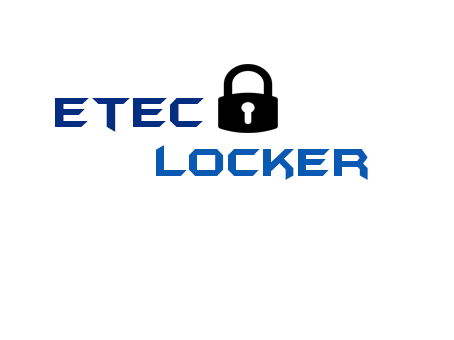
<style>
.page{position:relative;width:454px;height:340px;background:#ffffff}
.page>*{position:absolute;margin:0}
.t1{font:48px "BatmanForeverAlternate";color:#052e83}
.t2{font:45px "BatmanForeverAlternate";color:#0a59b2}
</style>
<div class="page">
<p class="t1" style="left:55px;top:98px;width:149px;height:34px">Etec</p>
<p class="t2" style="left:156px;top:145px;width:212px;height:35px">Locker</p>
</div>
